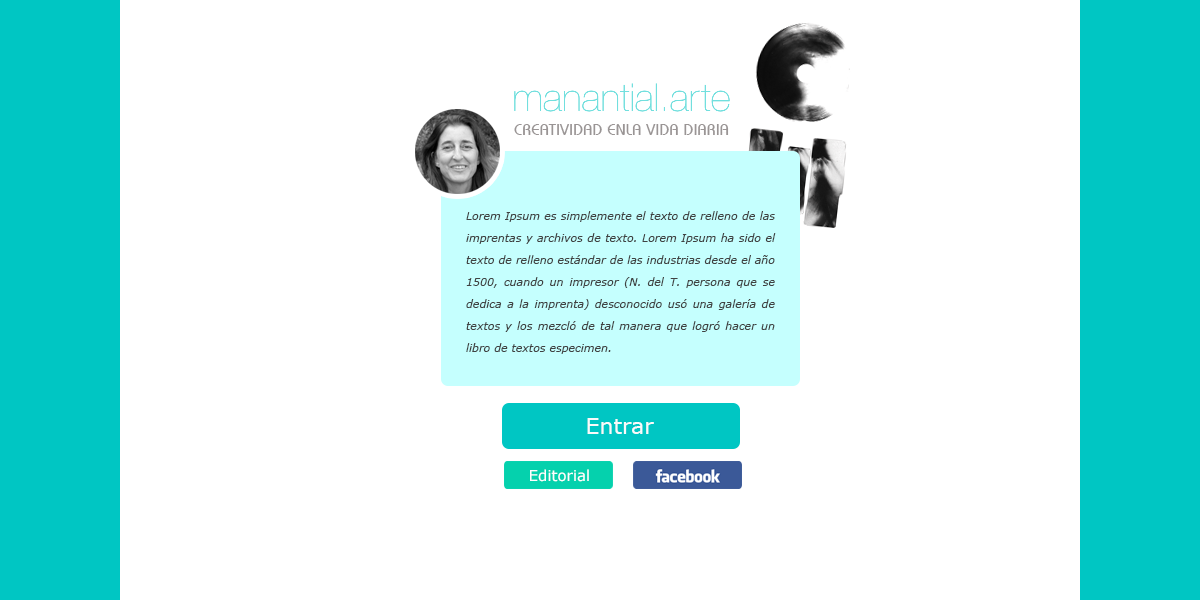
<style>
.page{position:relative;width:1200px;height:600px;background:#ffffff}
.page>*{position:absolute;margin:0}
.t1{font:16px "BahamasPlain";letter-spacing:0.02em;color:#9a9595}
.t2{font:11px/22px "Verdana-Italic";color:#404242}
.t3{font:22px "Verdana";color:#fafafa}
.t4{font:15px "Verdana";color:#ffffff}
</style>
<div class="page">
<p class="t1" style="left:514px;top:124px;width:215px;height:11px">CREATIVIDAD ENLA VIDA DIARIA</p>
<p class="t2" style="left:466px;top:211px;width:310px;height:143px;text-align:justify">Lorem Ipsum es simplemente el texto de relleno de las imprentas y archivos de texto. Lorem Ipsum ha sido el texto de relleno estándar de las industrias desde el año 1500, cuando un impresor (N. del T. persona que se dedica a la imprenta) desconocido usó una galería de textos y los mezcló de tal manera que logró hacer un libro de textos especimen.</p>
<p class="t3" style="left:587px;top:418px;width:67px;height:16px">Entrar</p>
<p class="t4" style="left:530px;top:469px;width:59px;height:13px">Editorial</p>
</div>
